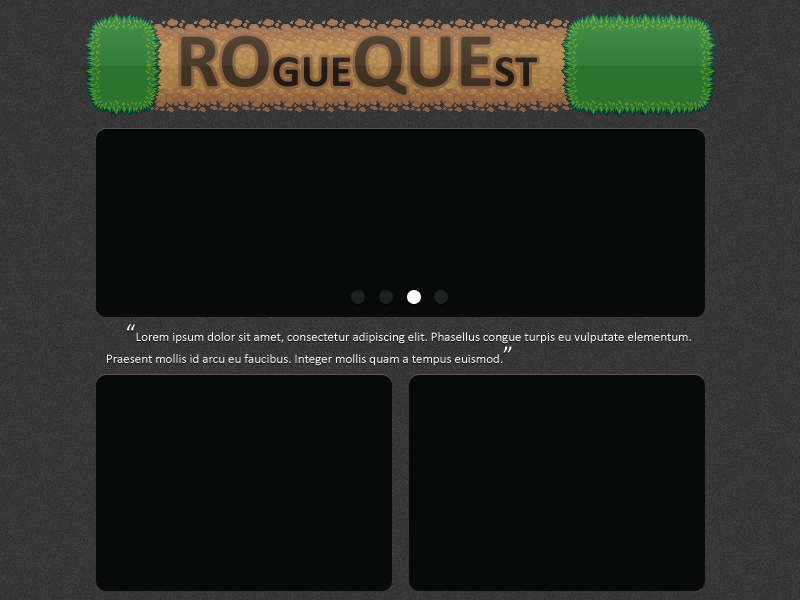
<style>
.page{position:relative;width:800px;height:600px;background:#080a0a}
.page>*{position:absolute;margin:0}
.t1{font:13px/22px "Calibri"}
.t2{font:24px/22px "Calibri"}
.t3{font:13px/22px "Calibri";color:#ffffff}
.t4{font:13px/22px "Calibri";color:#cccccc}
.t5{font:24px/22px "Calibri";color:#ffffff}
</style>
<div class="page">
<p class="t1" style="left:107px;top:325px;width:584px;height:42px"><span class="t2">“</span>Lorem ipsum dolor sit amet, consectetur adipiscing elit. Phasellus congue turpis eu vulputate elementum. <br>Praesent mollis id arcu eu faucibus. Integer mollis quam a tempus euismod.<span class="t2">”</span></p>
<p class="t3" style="left:107px;top:324px;width:584px;height:42px"><span class="t4">      </span><span class="t5">“</span>Lorem ipsum dolor sit amet, consectetur adipiscing elit. Phasellus congue turpis eu vulputate elementum. <br>Praesent mollis id arcu eu faucibus. Integer mollis quam a tempus euismod.<span class="t5">”</span></p>
</div>
